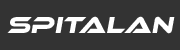
<style>
.page{position:relative;width:180px;height:50px;background:#333333}
.page>*{position:absolute;margin:0}
.t1{font:24px "EthnocentricRg-Italic";color:#ffffff}
</style>
<div class="page">
<p class="t1" style="left:7px;top:16px;width:168px;height:18px">Spitalan</p>
</div>
